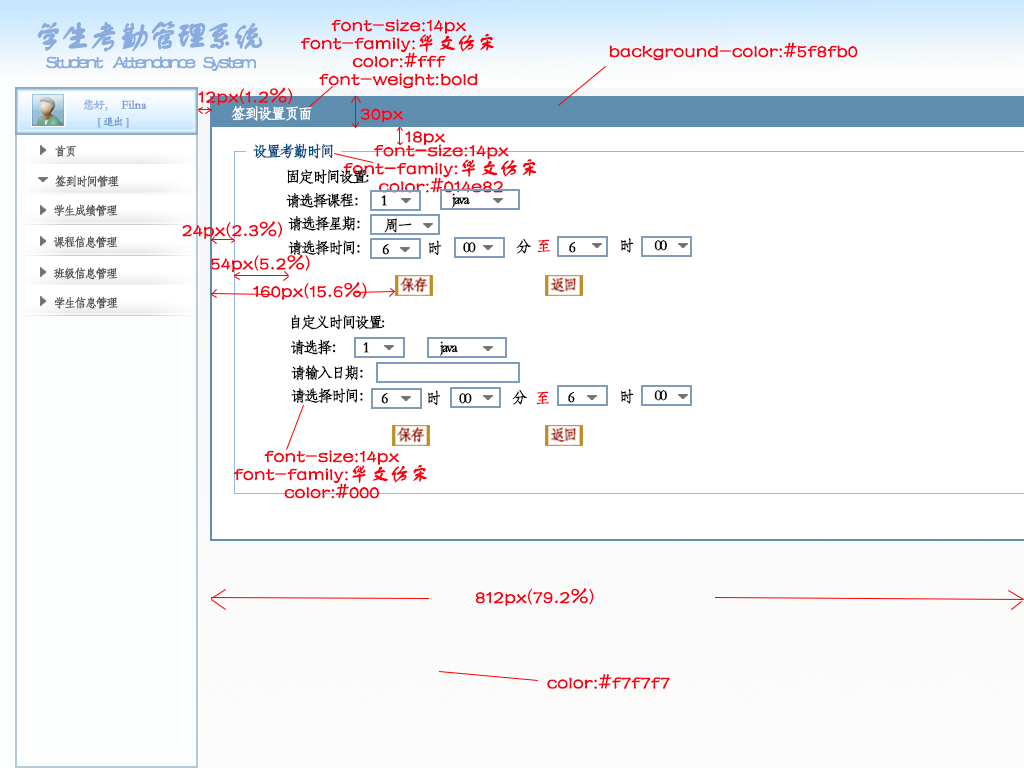
<style>
.page{position:relative;width:1024px;height:768px;background:#ffffff}
.page>*{position:absolute;margin:0}
.t1{font:32.7px "FZSTK--GBK1-0";letter-spacing:-0.15em;color:#89abde;font-weight:bold}
.t2{font:19.6px/18px "FZSTK--GBK1-0";color:#fb0012;font-weight:bold}
.t3{font:19.6px "FZSTK--GBK1-0";color:#fb0012;font-weight:bold}
.t4{font:19.6px "FZSTK--GBK1-0";letter-spacing:-0.15em;color:#89abde;font-weight:bold}
.t5{font:12px "STKaiti";letter-spacing:-0.15em;color:#99b7e5;font-weight:bold}
.t6{font:12px "STKaiti";color:#789cd3;font-weight:bold}
.t7{font:15.3px "STFangsong";letter-spacing:-0.15em;color:#fdfefe;font-weight:bold}
.t8{font:10.9px "STKaiti";letter-spacing:-0.15em;color:#789cd3;font-weight:bold}
.t9{font:12px "STFangsong";letter-spacing:-0.15em;color:#555555;font-weight:bold}
.t10{font:15.3px "STFangsong";letter-spacing:-0.15em;color:#014e82;font-weight:bold}
.t11{font:15.3px "STFangsong";letter-spacing:-0.15em;color:#030303;font-weight:bold}
.t12{font:15.3px "STFangsong";letter-spacing:-0.15em;color:#fb0410;font-weight:bold}
.t13{font:15.3px "STFangsong";letter-spacing:-0.15em;color:#010101;font-weight:bold}
.t14{font:15.3px "STFangsong";letter-spacing:-0.15em;color:#000000;font-weight:bold}
</style>
<div class="page">
<p class="t1" style="left:37px;top:21px;width:226px;height:31px">学生考勤管理系统</p>
<p class="t2" style="left:300px;top:19px;width:194px;height:70px;text-align:center">font-size:14px<br>font-family:华文仿宋<br>color:#fff<br>font-weight:bold</p>
<p class="t3" style="left:609px;top:42px;width:249px;height:19px">background-color:#5f8fb0</p>
<p class="t4" style="left:46px;top:56px;width:211px;height:16px">Student     Attendance    System</p>
<p class="t3" style="left:198px;top:87px;width:95px;height:19px">12px(1.2%)</p>
<p class="t5" style="left:83px;top:99px;width:25px;height:12px">您好，</p>
<p class="t6" style="left:121px;top:100px;width:26px;height:9px">Filna</p>
<p class="t7" style="left:231px;top:105px;width:81px;height:16px">签到设置页面</p>
<p class="t3" style="left:360px;top:108px;width:44px;height:15px">30px</p>
<p class="t8" style="left:98px;top:116px;width:31px;height:12px">[   退出   ]</p>
<p class="t3" style="left:405px;top:131px;width:41px;height:15px">18px</p>
<p class="t9" style="left:55px;top:145px;width:21px;height:12px">首页</p>
<p class="t10" style="left:253px;top:143px;width:80px;height:16px">设置考勤时间</p>
<p class="t2" style="left:343px;top:144px;width:194px;height:49px;text-align:center">font-size:14px<br>font-family:华文仿宋<br>color:#014e82</p>
<p class="t11" style="left:287px;top:169px;width:82px;height:15px">固定时间设置:</p>
<p class="t9" style="left:55px;top:175px;width:64px;height:13px">签到时间管理</p>
<p class="t11" style="left:286px;top:193px;width:72px;height:15px">请选择课程：</p>
<p class="t11" style="left:381px;top:195px;width:6px;height:11px">1</p>
<p class="t11" style="left:452px;top:193px;width:18px;height:15px">java</p>
<p class="t9" style="left:54px;top:204px;width:64px;height:13px">学生成绩管理</p>
<p class="t3" style="left:182px;top:221px;width:100px;height:18px">24px(2.3%)</p>
<p class="t11" style="left:288px;top:215px;width:72px;height:16px">请选择星期：</p>
<p class="t11" style="left:384px;top:218px;width:28px;height:15px">周一</p>
<p class="t9" style="left:53px;top:236px;width:65px;height:13px">课程信息管理</p>
<p class="t11" style="left:288px;top:240px;width:72px;height:16px">请选择时间：</p>
<p class="t11" style="left:382px;top:244px;width:7px;height:11px">6</p>
<p class="t11" style="left:429px;top:240px;width:13px;height:16px">时</p>
<p class="t11" style="left:463px;top:242px;width:13px;height:11px">00</p>
<p class="t11" style="left:516px;top:239px;width:15px;height:15px">分</p>
<p class="t12" style="left:537px;top:239px;width:13px;height:14px">至</p>
<p class="t13" style="left:569px;top:242px;width:7px;height:11px">6</p>
<p class="t14" style="left:621px;top:238px;width:13px;height:15px">时</p>
<p class="t14" style="left:654px;top:240px;width:13px;height:11px">00</p>
<p class="t3" style="left:211px;top:254px;width:99px;height:19px">54px(5.2%)</p>
<p class="t9" style="left:54px;top:267px;width:64px;height:13px">班级信息管理</p>
<p class="t3" style="left:253px;top:282px;width:114px;height:18px">160px(15.6%)</p>
<p class="t9" style="left:54px;top:296px;width:64px;height:13px">学生信息管理</p>
<p class="t11" style="left:291px;top:314px;width:94px;height:16px">自定义时间设置:</p>
<p class="t11" style="left:290px;top:339px;width:46px;height:16px">请选择：</p>
<p class="t11" style="left:363px;top:342px;width:6px;height:11px">1</p>
<p class="t11" style="left:440px;top:341px;width:18px;height:15px">java</p>
<p class="t11" style="left:291px;top:365px;width:72px;height:16px">请输入日期：</p>
<p class="t11" style="left:291px;top:388px;width:72px;height:16px">请选择时间：</p>
<p class="t11" style="left:428px;top:390px;width:13px;height:16px">时</p>
<p class="t11" style="left:512px;top:390px;width:15px;height:15px">分</p>
<p class="t14" style="left:621px;top:389px;width:13px;height:15px">时</p>
<p class="t14" style="left:654px;top:390px;width:13px;height:11px">00</p>
<p class="t11" style="left:381px;top:393px;width:7px;height:11px">6</p>
<p class="t11" style="left:459px;top:393px;width:13px;height:11px">00</p>
<p class="t12" style="left:536px;top:391px;width:13px;height:14px">至</p>
<p class="t13" style="left:568px;top:392px;width:7px;height:11px">6</p>
<p class="t2" style="left:233px;top:450px;width:194px;height:49px;text-align:center">font-size:14px<br>font-family:华文仿宋<br>color:#000</p>
<p class="t3" style="left:475px;top:588px;width:119px;height:18px">812px(79.2%)</p>
<p class="t3" style="left:547px;top:674px;width:123px;height:15px">color:#f7f7f7</p>
</div>
